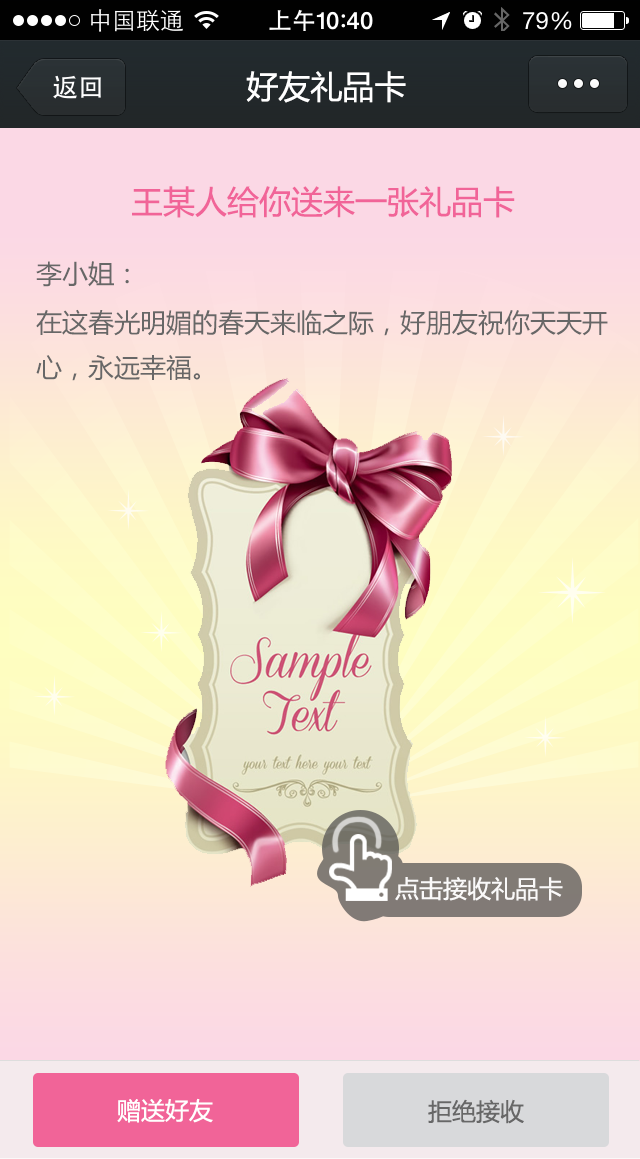
<style>
.page{position:relative;width:640px;height:1159px}
.page>*{position:absolute;margin:0}
.t1{font:32px "MicrosoftYaHei";color:#ffffff}
.t2{font:32px "MicrosoftYaHei";color:#f16498}
.t3{font:26px "MicrosoftYaHei";color:#676767}
.t4{font:26px/45px "MicrosoftYaHei";color:#676767}
.t5{font:24px "MicrosoftYaHei";color:#faf9f9}
.t6{font:24px "MicrosoftYaHei";color:#ffffff}
.t7{font:24px "MicrosoftYaHei";color:#676767}
</style>
<div class="page">
<p class="t1" style="left:246px;top:71px;width:160px;height:32px">好友礼品卡</p>
<p class="t2" style="left:132px;top:186px;width:383px;height:32px">王某人给你送来一张礼品卡</p>
<p class="t3" style="left:36px;top:261px;width:93px;height:26px">李小姐：</p>
<p class="t4" style="left:36px;top:309px;width:572px;height:72px">在这春光明媚的春天来临之际，好朋友祝你天天开心，永远幸福。</p>
<p class="t5" style="left:395px;top:877px;width:168px;height:24px">点击接收礼品卡</p>
<p class="t6" style="left:117px;top:1098px;width:96px;height:25px">赠送好友</p>
<p class="t7" style="left:428px;top:1099px;width:96px;height:25px">拒绝接收</p>
</div>
